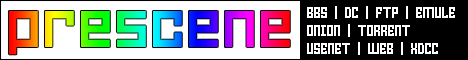
<style>
.page{position:relative;width:468px;height:60px;background:#ffffff}
.page>*{position:absolute;margin:0}
.t1{font:15px "HomespunTTBRK";color:#ffffff}
.t2{font:72px "HomespunTTBRK"}
</style>
<div class="page">
<p class="t1" style="left:307px;top:6px;width:148px;height:49px">BBS | DC | FTP | EMULE<br>ONION | TORRENT<br>USENET | WEB | XDCC</p>
<p class="t2" style="left:9px;top:11px;width:281px;height:44px">prescene</p>
</div>
